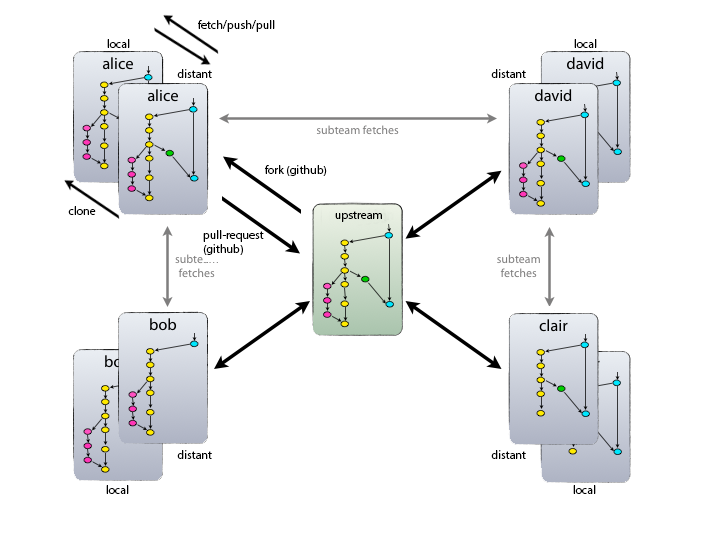
<style>
.page{position:relative;width:717px;height:534px;background:#ffffff}
.page>*{position:absolute;margin:0}
.t1{font:12px "MyriadPro-Regular";color:#000000}
</style>
<div class="page">
<p class="t1" style="left:198px;top:20px;width:77px;height:12px">fetch/push/pull</p>
<p class="t1" style="left:107px;top:39px;width:23px;height:9px">local</p>
<p class="t1" style="left:574px;top:39px;width:23px;height:9px">local</p>
<p class="t1" style="left:177px;top:69px;width:35px;height:9px">distant</p>
<p class="t1" style="left:491px;top:69px;width:35px;height:9px">distant</p>
<p class="t1" style="left:265px;top:165px;width:62px;height:11px">fork (github)</p>
<p class="t1" style="left:68px;top:206px;width:28px;height:9px">clone</p>
<p class="t1" style="left:335px;top:211px;width:47px;height:11px">upstream</p>
<p class="t1" style="left:203px;top:230px;width:61px;height:25px">pull-request <br>(github)</p>
<p class="t1" style="left:177px;top:450px;width:35px;height:9px">distant</p>
<p class="t1" style="left:491px;top:450px;width:35px;height:9px">distant</p>
<p class="t1" style="left:106px;top:485px;width:23px;height:9px">local</p>
<p class="t1" style="left:573px;top:485px;width:23px;height:9px">local</p>
</div>
